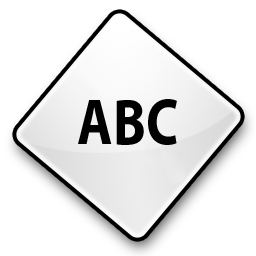
<style>
.page{position:relative;width:256px;height:256px;background:#ffffff}
.page>*{position:absolute;margin:0}
.t1{font:66px "MyriadPro-Bold";letter-spacing:0.005em;color:#010101;scale:0.82 1}
</style>
<div class="page">
<p class="t1" style="left:78px;top:99px;width:99px;height:46px">ABC</p>
</div>
